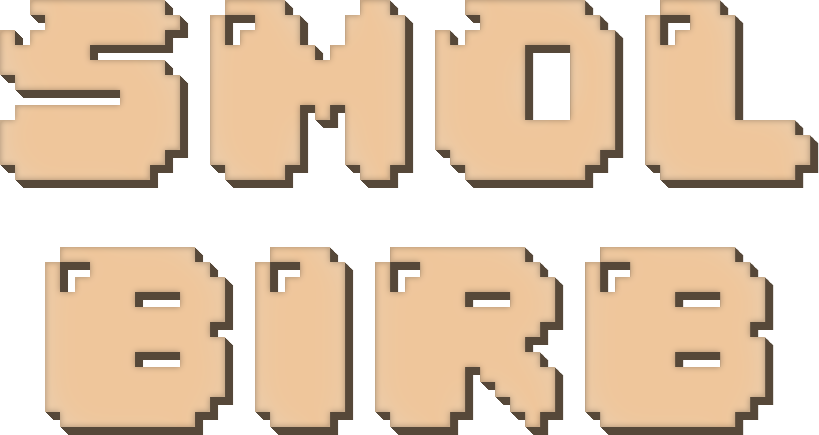
<style>
.page{position:relative;width:819px;height:435px;background:#ffffff}
.page>*{position:absolute;margin:0}
.t1{font:255.1px/247px "04b30";color:#ebccaa}
.t2{font:255.1px/247px "04b30";color:#efc69b}
</style>
<div class="page">
<p class="t1" style="left:0px;top:0px;width:811px;height:427px;text-align:center">smol<br>birb</p>
<p class="t2" style="left:1px;top:1px;width:811px;height:427px;text-align:center">smol<br>birb</p>
<p class="t2" style="left:2px;top:2px;width:811px;height:427px;text-align:center">smol<br>birb</p>
<p class="t2" style="left:2px;top:2px;width:811px;height:427px;text-align:center">smol<br>birb</p>
<p class="t2" style="left:2px;top:2px;width:811px;height:427px;text-align:center">smol<br>birb</p>
<p class="t2" style="left:3px;top:3px;width:811px;height:427px;text-align:center">smol<br>birb</p>
<p class="t2" style="left:3px;top:3px;width:811px;height:427px;text-align:center">smol<br>birb</p>
<p class="t2" style="left:3px;top:3px;width:811px;height:427px;text-align:center">smol<br>birb</p>
<p class="t2" style="left:4px;top:4px;width:811px;height:427px;text-align:center">smol<br>birb</p>
<p class="t2" style="left:5px;top:5px;width:811px;height:427px;text-align:center">smol<br>birb</p>
<p class="t2" style="left:6px;top:6px;width:811px;height:427px;text-align:center">smol<br>birb</p>
<p class="t2" style="left:6px;top:6px;width:811px;height:427px;text-align:center">smol<br>birb</p>
<p class="t2" style="left:6px;top:6px;width:811px;height:427px;text-align:center">smol<br>birb</p>
<p class="t2" style="left:7px;top:7px;width:811px;height:427px;text-align:center">smol<br>birb</p>
<p class="t2" style="left:7px;top:7px;width:811px;height:427px;text-align:center">smol<br>birb</p>
<p class="t2" style="left:7px;top:7px;width:811px;height:427px;text-align:center">smol<br>birb</p>
<p class="t2" style="left:8px;top:8px;width:811px;height:427px;text-align:center">smol<br>birb</p>
</div>
